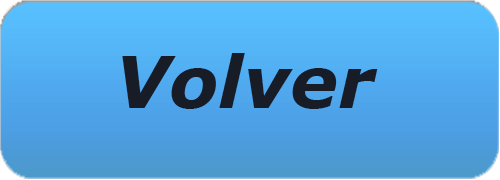
<style>
.page{position:relative;width:500px;height:180px}
.page>*{position:absolute;margin:0}
.t1{font:72px "Verdana-BoldItalic";color:#181c27}
</style>
<div class="page">
<p class="t1" style="left:122px;top:53px;width:256px;height:56px">Volver</p>
</div>
